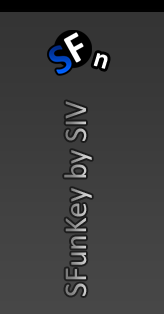
<style>
.page{position:relative;width:164px;height:314px}
.page>*{position:absolute;margin:0}
.t1{font:28px "Calibri-Bold";color:#ffffff}
.t2{font:32px "Calibri"}
</style>
<div class="page">
<p class="t1" style="left:93px;top:53px;width:15px;height:16px;rotate:17deg">n</p>
<p class="t2" style="left:64px;top:101px;width:28px;height:195px;rotate:-90deg">SFunKey by SIV</p>
</div>
